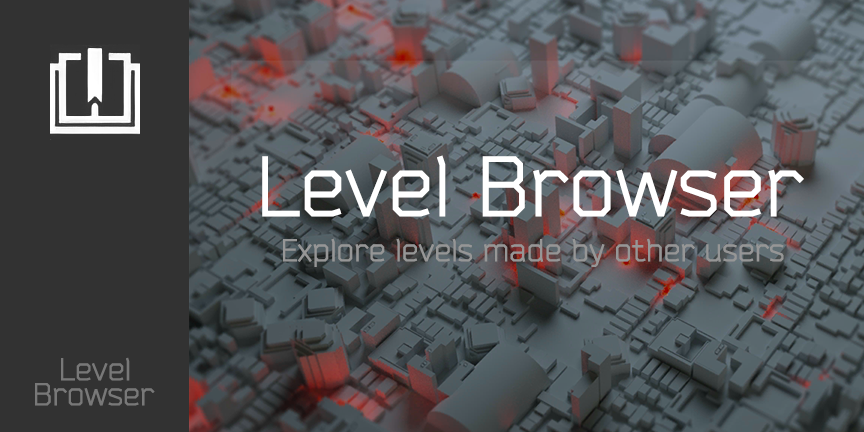
<style>
.page{position:relative;width:864px;height:432px}
.page>*{position:absolute;margin:0}
.t1{font:86px "Bender";color:#ffffff}
.t2{font:32px "Bender";color:#969696}
.t3{font:32px "Bender";color:#787878}
</style>
<div class="page">
<p class="t1" style="left:262px;top:155px;width:542px;height:62px">Level Browser</p>
<p class="t2" style="left:283px;top:238px;width:501px;height:29px">Explore levels made by other users</p>
<p class="t3" style="left:61px;top:357px;width:69px;height:24px">Level</p>
<p class="t3" style="left:35px;top:383px;width:120px;height:23px">Browser</p>
</div>
